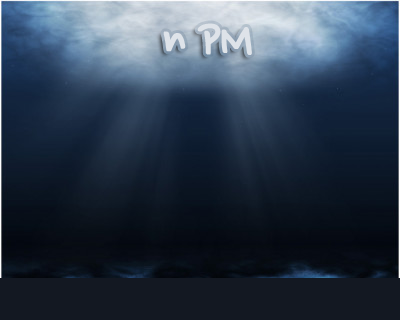
<style>
.page{position:relative;width:400px;height:320px}
.page>*{position:absolute;margin:0}
.t1{font:55px "NanumPen";letter-spacing:-0.05em;color:#dee3e9;font-weight:bold}
</style>
<div class="page">
<p class="t1" style="left:163px;top:23px;width:89px;height:32px">n PM</p>
</div>
